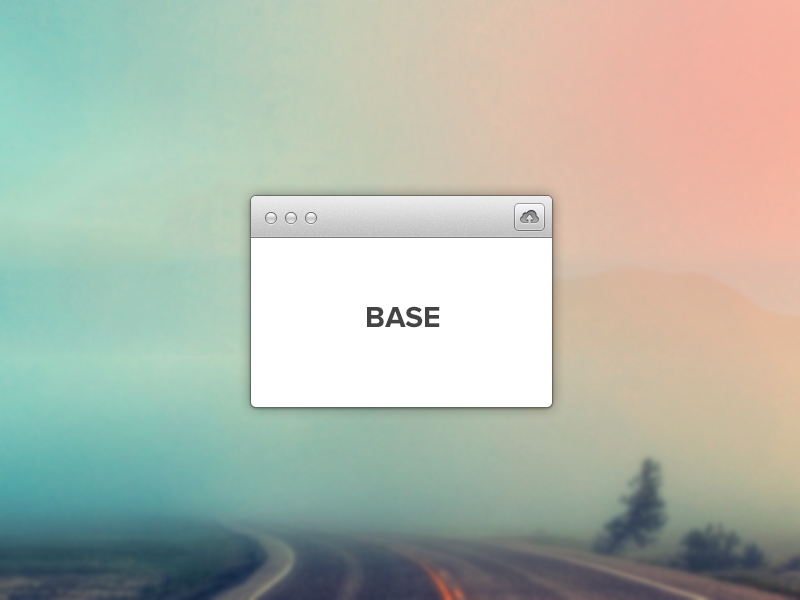
<style>
.page{position:relative;width:800px;height:600px}
.page>*{position:absolute;margin:0}
.t1{font:30px "ProximaNova-Bold";color:#444444}
</style>
<div class="page">
<p class="t1" style="left:367px;top:306px;width:73px;height:22px">BASE</p>
</div>
